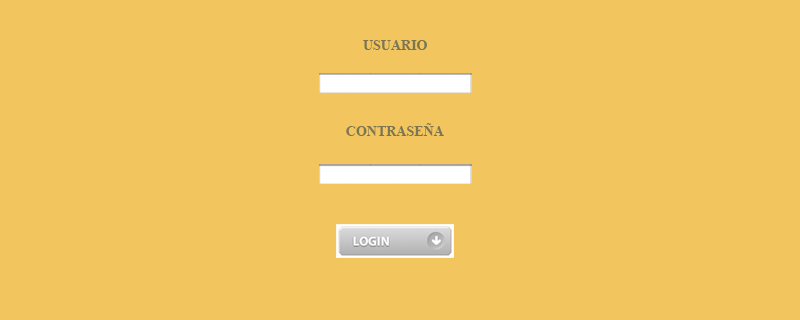
<style>
.page{position:relative;width:800px;height:320px;background:#f3c55e}
.page>*{position:absolute;margin:0}
.t1{font:14px "TimesNewRomanPS-BoldMT";color:#7b7552}
</style>
<div class="page">
<p class="t1" style="left:363px;top:40px;width:64px;height:10px">USUARIO</p>
<p class="t1" style="left:346px;top:123px;width:98px;height:13px">CONTRASEÑA</p>
</div>
